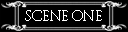
<style>
.page{position:relative;width:128px;height:32px;background:#000000}
.page>*{position:absolute;margin:0}
.t1{font:14px "TrajanPro-Regular";letter-spacing:-0.1em;color:#ffffff}
</style>
<div class="page">
<p class="t1" style="left:25px;top:10px;width:77px;height:11px">SCENE ONE</p>
</div>
